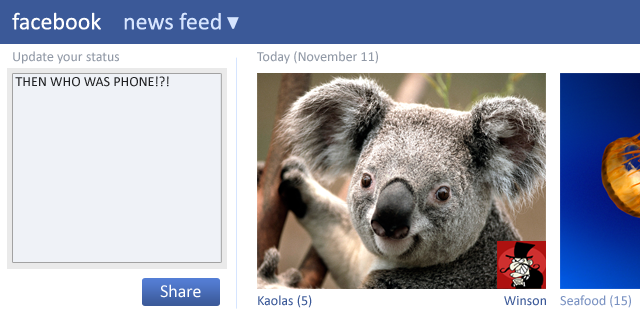
<style>
.page{position:relative;width:640px;height:320px;background:#ffffff}
.page>*{position:absolute;margin:0}
.t1{font:24px "Calibri";color:#ffffff}
.t2{font:24px "Calibri";color:#d6e5ff}
.t3{font:14px "Calibri";color:#9199a6}
.t4{font:14px "Calibri";color:#202123}
.t5{font:18px "Calibri";color:#ffffff}
.t6{font:14px "Calibri";color:#3b5998}
.t7{font:14px "Calibri";color:#7a92c2}
</style>
<div class="page">
<p class="t1" style="left:12px;top:12px;width:89px;height:18px">facebook</p>
<p class="t2" style="left:124px;top:12px;width:97px;height:18px">news feed</p>
<p class="t3" style="left:13px;top:51px;width:106px;height:13px">Update your status</p>
<p class="t3" style="left:257px;top:51px;width:121px;height:13px">Today (November 11)</p>
<p class="t4" style="left:15px;top:76px;width:154px;height:11px">THEN WHO WAS PHONE!?!</p>
<p class="t5" style="left:160px;top:284px;width:41px;height:14px">Share</p>
<p class="t6" style="left:258px;top:295px;width:54px;height:13px">Kaolas (5)</p>
<p class="t6" style="left:504px;top:296px;width:42px;height:10px">Winson</p>
<p class="t7" style="left:560px;top:295px;width:71px;height:13px">Seafood (15)<br><span class="t6">)</span></p>
</div>
